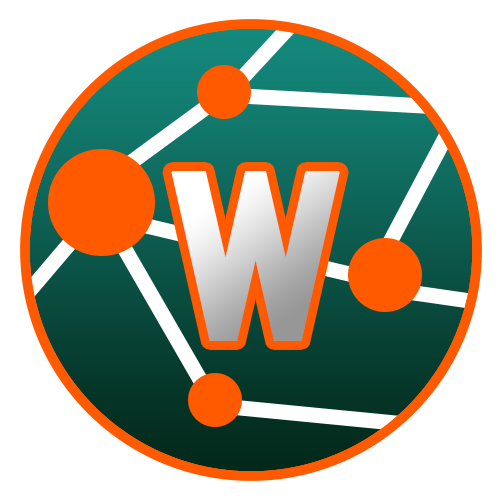
<style>
.page{position:relative;width:500px;height:500px;background:#ffffff}
.page>*{position:absolute;margin:0}
.t1{font:239.4px "Airport";letter-spacing:0.01em;font-variant:small-caps;font-weight:bold;scale:1.43 1}
</style>
<div class="page">
<p class="t1" style="left:171px;top:171px;width:169px;height:170px">W</p>
</div>
